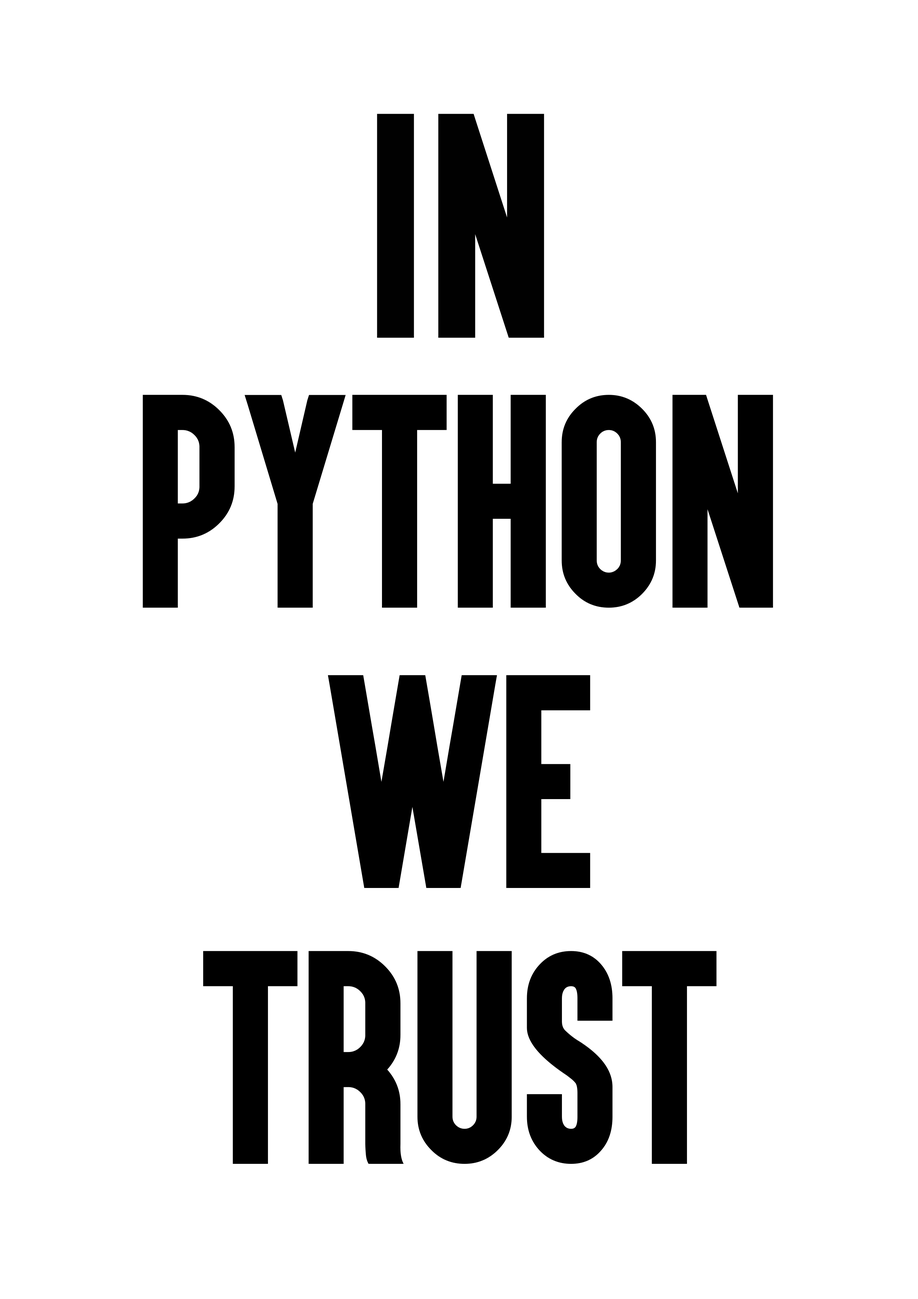
<style>
.page{position:relative;width:918px;height:1299px;background:#ffffff}
.page>*{position:absolute;margin:0}
.t1{font:263.7px "Aku&Kamu";color:#010101}
.t2{font:250.7px "Aku&Kamu";color:#000000}
</style>
<div class="page">
<p class="t1" style="left:377px;top:114px;width:167px;height:224px">in</p>
<p class="t2" style="left:143px;top:395px;width:630px;height:213px">PYthon</p>
<p class="t2" style="left:328px;top:675px;width:263px;height:213px">We</p>
<p class="t2" style="left:203px;top:951px;width:514px;height:213px">Trust</p>
</div>
